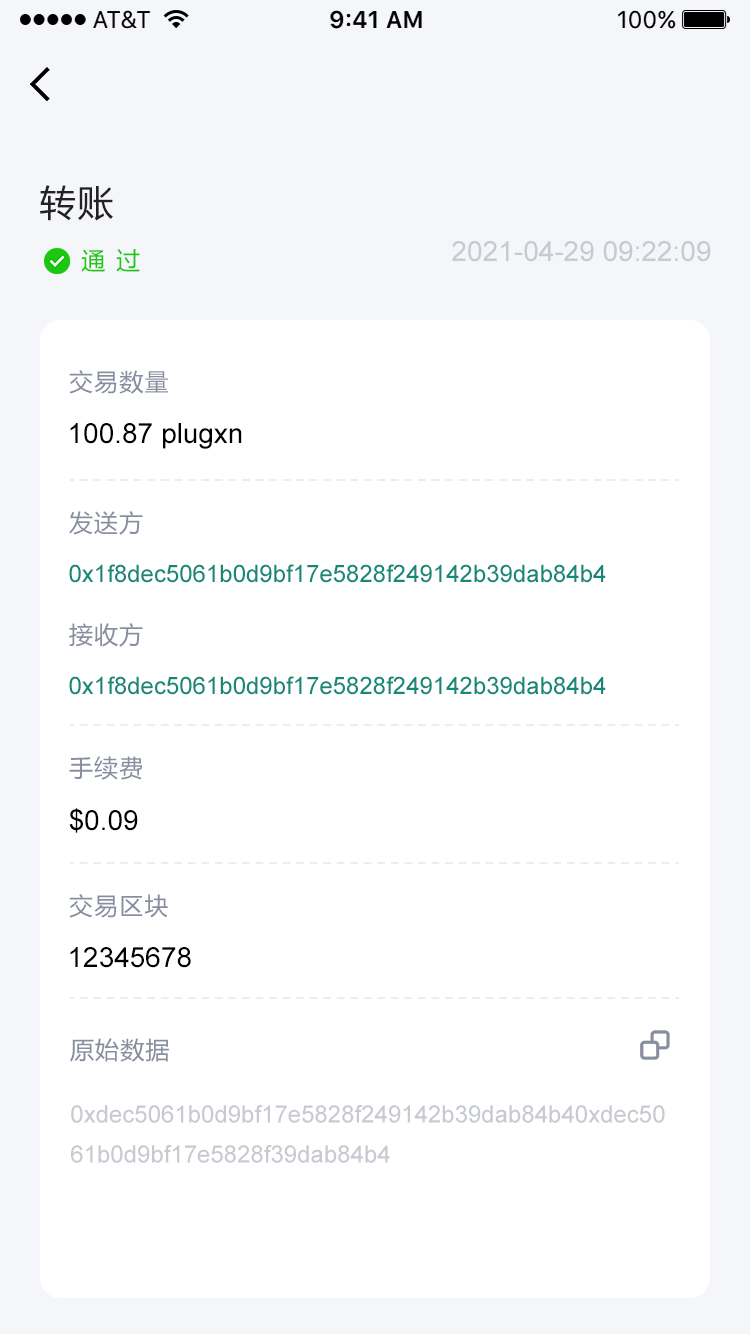
<style>
.page{position:relative;width:750px;height:1334px;background:#ffffff}
.page>*{position:absolute;margin:0}
.t1{font:36px "MicrosoftYaHei";letter-spacing:0.05em;color:#222222}
.t2{font:28px "ArialMT";color:#c8cad2}
.t3{font:24px "MicrosoftYaHei";letter-spacing:0.075em;color:#1dc70f}
.t4{font:24px "MicrosoftYaHei";letter-spacing:0.05em;color:#878e9f}
.t5{font:28px "ArialMT";color:#000000}
.t6{font:24px "ArialMT";color:#158878}
.t7{font:24px/40px "ArialMT";color:#c8cad2}
</style>
<div class="page">
<p class="t1" style="left:40px;top:185px;width:73px;height:36px">转账</p>
<p class="t2" style="left:452px;top:241px;width:259px;height:21px">2021-04-29 09:22:09</p>
<p class="t3" style="left:81px;top:249px;width:59px;height:23px">通 过</p>
<p class="t4" style="left:69px;top:370px;width:99px;height:24px">交易数量</p>
<p class="t5" style="left:70px;top:423px;width:172px;height:26px">100.87 plugxn</p>
<p class="t4" style="left:69px;top:511px;width:74px;height:24px">发送方</p>
<p class="t6" style="left:69px;top:564px;width:537px;height:19px">0x1f8dec5061b0d9bf17e5828f249142b39dab84b4</p>
<p class="t4" style="left:69px;top:623px;width:74px;height:24px">接收方</p>
<p class="t6" style="left:69px;top:676px;width:537px;height:19px">0x1f8dec5061b0d9bf17e5828f249142b39dab84b4</p>
<p class="t4" style="left:69px;top:756px;width:73px;height:24px">手续费</p>
<p class="t5" style="left:69px;top:808px;width:69px;height:25px">$0.09</p>
<p class="t4" style="left:69px;top:894px;width:99px;height:24px">交易区块</p>
<p class="t5" style="left:70px;top:947px;width:121px;height:21px">12345678</p>
<p class="t4" style="left:70px;top:1038px;width:99px;height:24px">原始数据</p>
<p class="t7" style="left:71px;top:1105px;width:594px;height:58px">0xdec5061b0d9bf17e5828f249142b39dab84b40xdec5061b0d9bf17e5828f39dab84b4</p>
</div>
